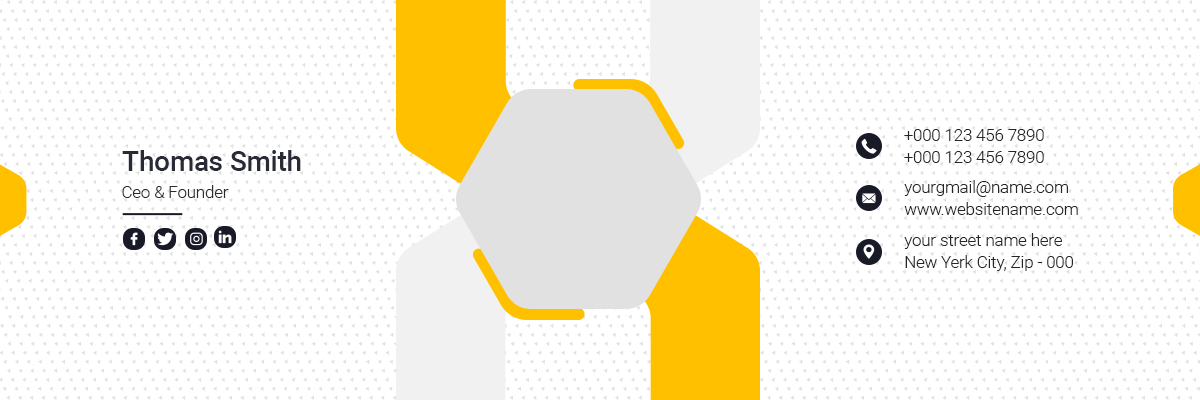
<style>
.page{position:relative;width:1200px;height:400px;background:#ffffff}
.page>*{position:absolute;margin:0}
.t1{font:16.6px/22.1px "Roboto-Light";color:#252525}
.t2{font:27.6px "Roboto-Medium";color:#282a35}
.t3{font:16.6px "Roboto-Light";color:#282a35}
</style>
<div class="page">
<p class="t1" style="left:904px;top:129px;width:140px;height:34px">+000 123 456 7890<br>+000 123 456 7890</p>
<p class="t2" style="left:122px;top:150px;width:179px;height:21px">Thomas Smith</p>
<p class="t3" style="left:122px;top:185px;width:107px;height:13px">Ceo &amp; Founder</p>
<p class="t1" style="left:904px;top:180px;width:174px;height:35px">yourgmail@name.com<br>www.websitename.com</p>
<p class="t1" style="left:904px;top:233px;width:169px;height:38px">your street name here<br>New Yerk City, Zip - 000</p>
</div>
